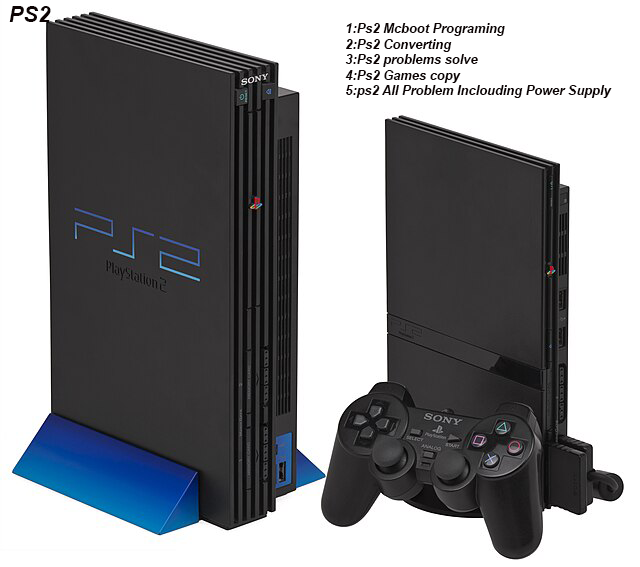
<style>
.page{position:relative;width:640px;height:567px;background:#ffffff}
.page>*{position:absolute;margin:0}
.t1{font:22.1px "Arial-BoldItalicMT";color:#0d0404}
.t2{font:12.9px "Arial-BoldItalicMT";color:#0d0404}
</style>
<div class="page">
<p class="t1" style="left:9px;top:6px;width:42px;height:16px">PS2</p>
<p class="t2" style="left:345px;top:23px;width:267px;height:75px">1:Ps2 Mcboot Programing<br>2:Ps2 Converting <br>3:Ps2 problems solve <br>4:Ps2 Games copy <br>5:ps2 All Problem Inclouding Power Supply</p>
</div>
